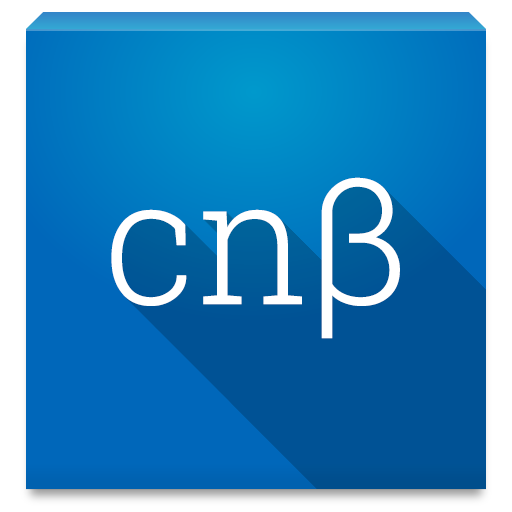
<style>
.page{position:relative;width:512px;height:512px}
.page>*{position:absolute;margin:0}
.t1{font:175px "RobotoSlab-Light";color:#ffffff}
</style>
<div class="page">
<p class="t1" style="left:111px;top:177px;width:289px;height:162px">cnβ</p>
</div>
